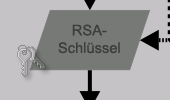
<style>
.page{position:relative;width:170px;height:100px;background:#c6c3c6}
.page>*{position:absolute;margin:0}
.t1{font:14.7px "ArialMT";color:#3b3c3b}
</style>
<div class="page">
<p class="t1" style="left:58px;top:24px;width:62px;height:30px;text-align:center">RSA-<br>Schlüssel</p>
</div>
